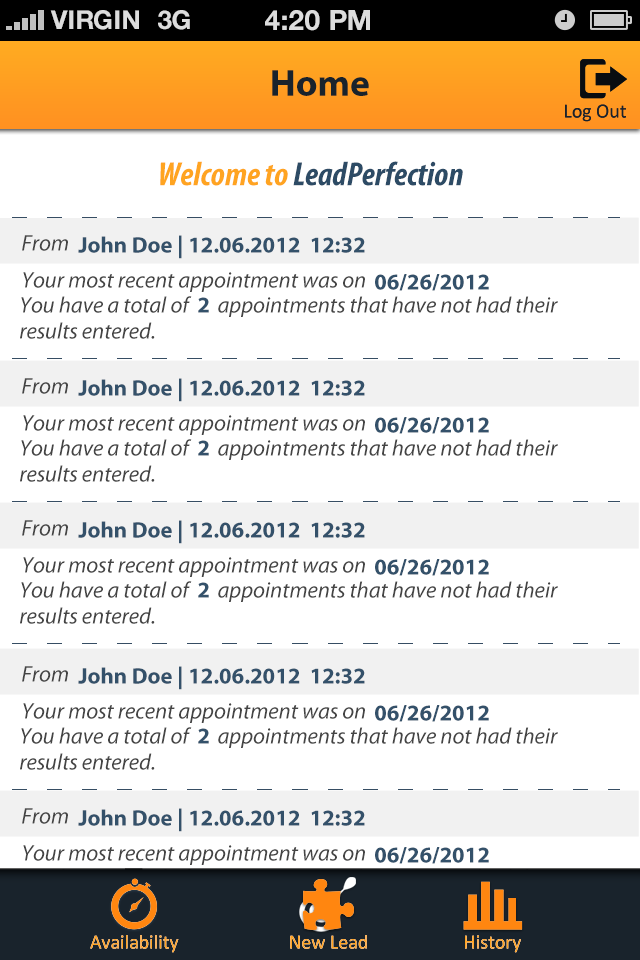
<style>
.page{position:relative;width:640px;height:960px;background:#ffffff}
.page>*{position:absolute;margin:0}
.t1{font:26px "HelveticaNeue-Bold";color:#dddddd;text-transform:uppercase}
.t2{font:28px "HelveticaNeue-Bold";color:#dddddd;text-transform:uppercase}
.t3{font:37.8px "MyriadPro-Bold";color:#19232c}
.t4{font:19.9px "Calibri";color:#19232c}
.t5{font:33.7px "MyriadPro-BoldCondIt";color:#2d4b65}
.t6{font:33.7px "MyriadPro-BoldCondIt";color:#ffa421}
.t7{font:22.6px "MyriadPro-It";color:#444444}
.t8{font:22.6px "MyriadPro-Bold";color:#34516a}
.t9{font:22.6px/26.1px "MyriadPro-It";color:#444444}
.t10{font:19.9px "Calibri";color:#ffa421}
</style>
<div class="page">
<p class="t1" style="left:50px;top:10px;width:89px;height:20px">VIRGIN</p>
<p class="t1" style="left:158px;top:10px;width:32px;height:20px">3G</p>
<p class="t2" style="left:265px;top:10px;width:105px;height:21px">4:20 pM</p>
<p class="t3" style="left:272px;top:70px;width:97px;height:26px">Home</p>
<p class="t4" style="left:565px;top:104px;width:61px;height:18px">Log Out</p>
<p class="t4" style="left:565px;top:104px;width:61px;height:18px">Log Out</p>
<p class="t5" style="left:160px;top:161px;width:303px;height:25px"><span class="t6">Welcome to </span>LeadPerfection</p>
<p class="t7" style="left:22px;top:235px;width:46px;height:16px">From</p>
<p class="t8" style="left:78px;top:235px;width:287px;height:24px">John Doe | 12.06.2012  12:32</p>
<p class="t7" style="left:23px;top:272px;width:342px;height:20px">Your most recent appointment was on</p>
<p class="t8" style="left:375px;top:274px;width:114px;height:17px">06/26/2012</p>
<p class="t9" style="left:20px;top:296px;width:538px;height:43px">You have a total of       appointments that have not had their<br>results entered.</p>
<p class="t8" style="left:198px;top:297px;width:11px;height:16px">2</p>
<p class="t7" style="left:22px;top:378px;width:46px;height:16px">From</p>
<p class="t8" style="left:78px;top:378px;width:287px;height:24px">John Doe | 12.06.2012  12:32</p>
<p class="t7" style="left:23px;top:415px;width:342px;height:20px">Your most recent appointment was on</p>
<p class="t8" style="left:375px;top:417px;width:114px;height:17px">06/26/2012</p>
<p class="t9" style="left:20px;top:439px;width:538px;height:43px">You have a total of       appointments that have not had their<br>results entered.</p>
<p class="t8" style="left:198px;top:440px;width:11px;height:16px">2</p>
<p class="t7" style="left:22px;top:520px;width:46px;height:16px">From</p>
<p class="t8" style="left:78px;top:520px;width:287px;height:24px">John Doe | 12.06.2012  12:32</p>
<p class="t7" style="left:23px;top:557px;width:342px;height:20px">Your most recent appointment was on</p>
<p class="t8" style="left:375px;top:559px;width:114px;height:17px">06/26/2012</p>
<p class="t9" style="left:20px;top:581px;width:538px;height:43px">You have a total of       appointments that have not had their<br>results entered.</p>
<p class="t8" style="left:198px;top:582px;width:11px;height:16px">2</p>
<p class="t7" style="left:22px;top:666px;width:46px;height:16px">From</p>
<p class="t8" style="left:78px;top:666px;width:287px;height:24px">John Doe | 12.06.2012  12:32</p>
<p class="t7" style="left:23px;top:703px;width:342px;height:20px">Your most recent appointment was on</p>
<p class="t8" style="left:375px;top:705px;width:114px;height:17px">06/26/2012</p>
<p class="t9" style="left:20px;top:727px;width:538px;height:43px">You have a total of       appointments that have not had their<br>results entered.</p>
<p class="t8" style="left:198px;top:728px;width:11px;height:16px">2</p>
<p class="t7" style="left:22px;top:808px;width:46px;height:16px">From</p>
<p class="t8" style="left:78px;top:808px;width:287px;height:24px">John Doe | 12.06.2012  12:32</p>
<p class="t7" style="left:23px;top:845px;width:342px;height:20px">Your most recent appointment was on</p>
<p class="t8" style="left:375px;top:847px;width:114px;height:17px">06/26/2012</p>
<p class="t10" style="left:90px;top:935px;width:89px;height:18px">Availability</p>
<p class="t10" style="left:90px;top:935px;width:89px;height:18px">Availability</p>
<p class="t10" style="left:290px;top:935px;width:77px;height:14px">New Lead</p>
<p class="t10" style="left:290px;top:935px;width:77px;height:14px">New Lead</p>
<p class="t10" style="left:465px;top:935px;width:56px;height:18px">History</p>
<p class="t10" style="left:465px;top:935px;width:56px;height:18px">History</p>
</div>
